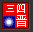
<style>
.page{position:relative;width:33px;height:32px;background:#f20000}
.page>*{position:absolute;margin:0}
.t1{font:10.4px "SimSun";color:#ffffff}
.t2{font:11.7px "SimSun";color:#ffffff}
</style>
<div class="page">
<p class="t1" style="left:6px;top:4px;width:19px;height:9px">三四</p>
<p class="t2" style="left:16px;top:15px;width:11px;height:12px">晋</p>
</div>
